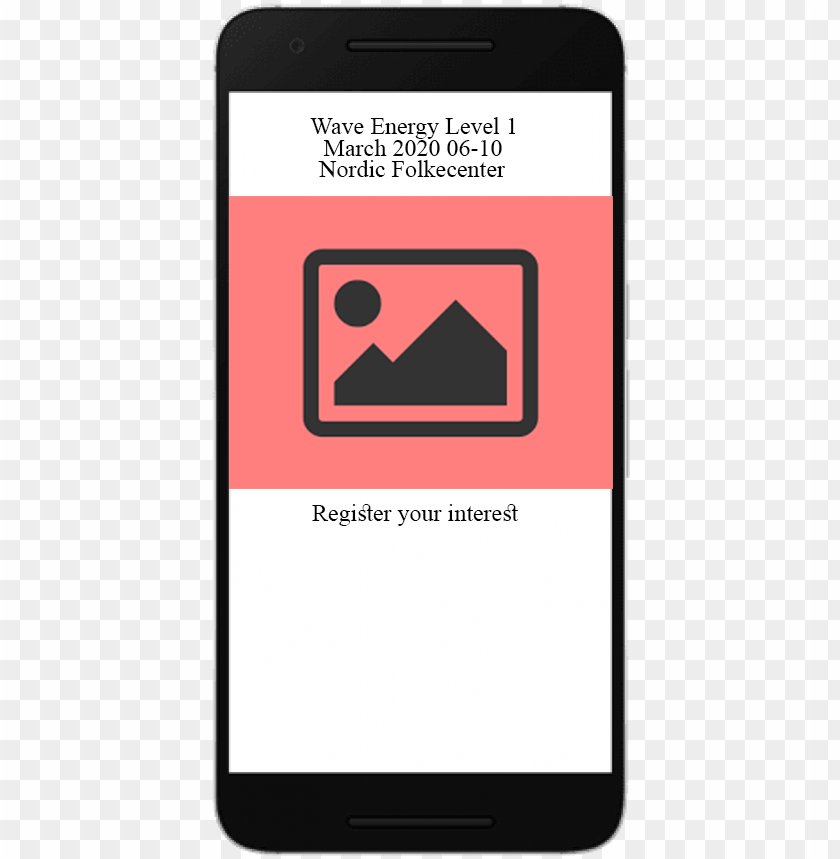
<style>
.page{position:relative;width:840px;height:859px;background:#fefefe}
.page>*{position:absolute;margin:0}
.t1{font:24px "TimesNewRomanPSMT";color:#000000}
</style>
<div class="page">
<p class="t1" style="left:310px;top:117px;width:206px;height:22px">Wave Energy Level 1</p>
<p class="t1" style="left:323px;top:139px;width:179px;height:17px">06-10 March 2020</p>
<p class="t1" style="left:318px;top:160px;width:187px;height:18px">Nordic Folkecenter</p>
<p class="t1" style="left:312px;top:504px;width:207px;height:22px">Register your interest</p>
</div>
